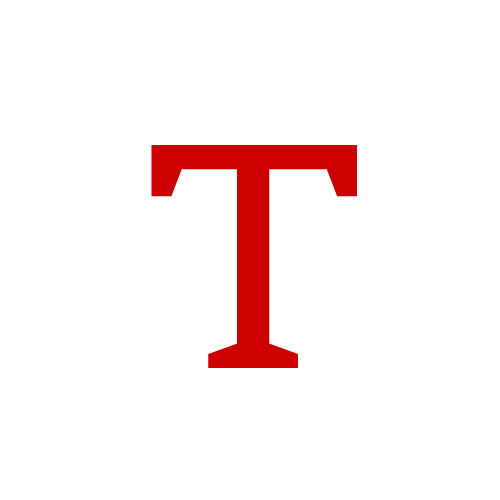
<style>
.page{position:relative;width:500px;height:500px;background:#ffffff}
.page>*{position:absolute;margin:0}
.t1{font:315.8px "Belgrano-Regular";letter-spacing:-0.06em;color:#cc0000}
</style>
<div class="page">
<p class="t1" style="left:151px;top:145px;width:206px;height:223px">T</p>
</div>
